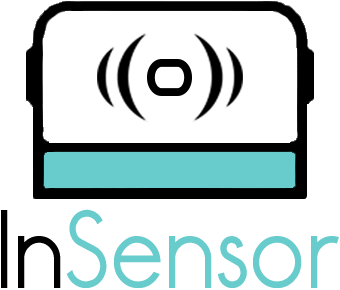
<style>
.page{position:relative;width:340px;height:290px;background:#ffffff}
.page>*{position:absolute;margin:0}
.t1{font:132.8px "MadeleinaSans";letter-spacing:0.01em;color:#68cbcc;scale:0.93 1}
.t2{font:132.8px "MadeleinaSans";letter-spacing:0.01em;color:#000000;scale:0.93 1}
</style>
<div class="page">
<p class="t1" style="left:1px;top:209px;width:338px;height:79px"><span class="t2">In</span>Sensor</p>
</div>
